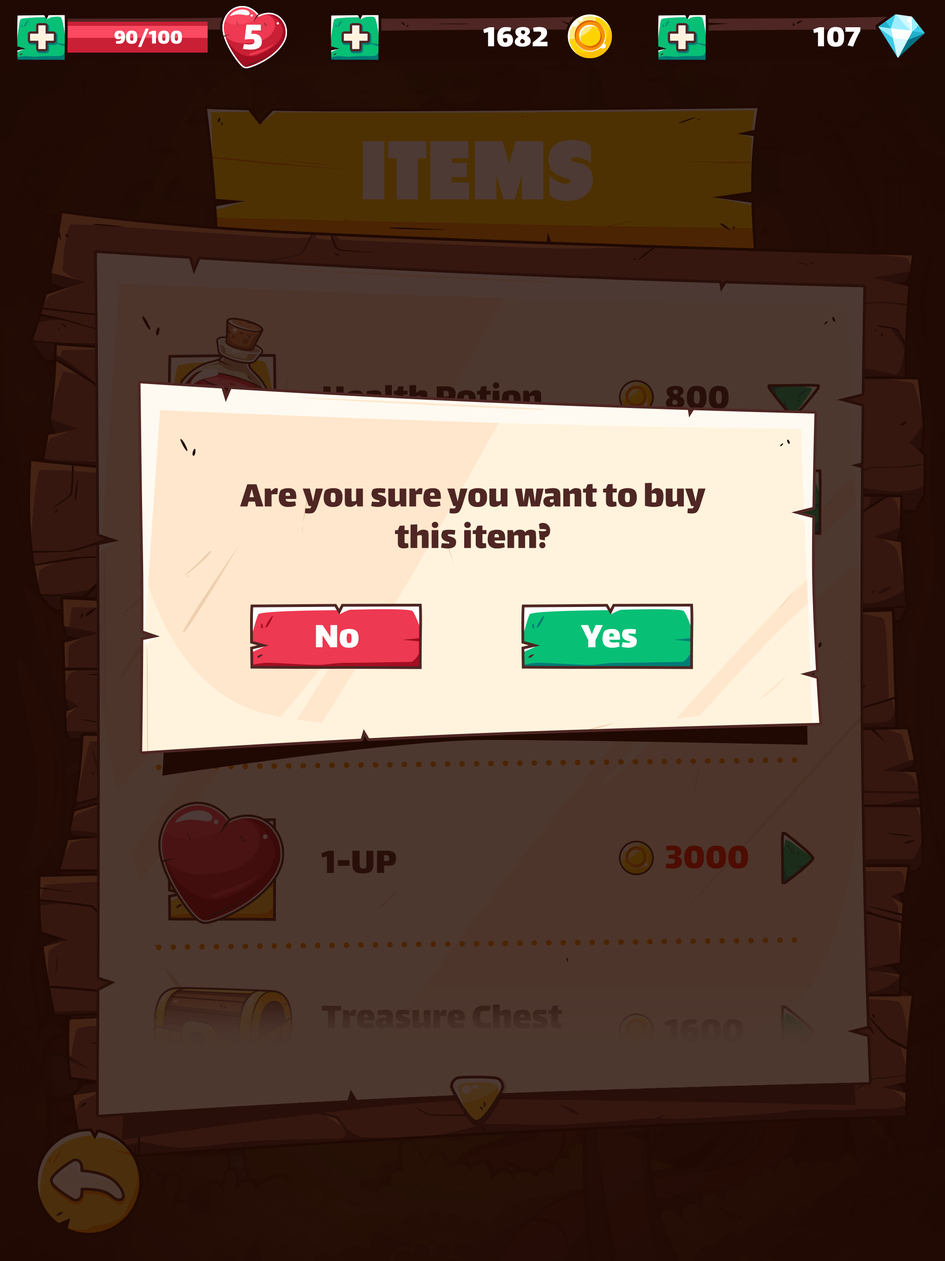
<style>
.page{position:relative;width:945px;height:1261px}
.page>*{position:absolute;margin:0}
.t1{font:57.2px "Lalezar-Regular";color:#fff3dd}
.t2{font:22.2px "Lalezar-Regular";color:#ffffff}
.t3{font:42.5px "Lalezar-Regular";color:#ffffff}
.t4{font:33.2px "Lalezar-Regular";color:#ffffff}
.t5{font:83.1px "Tondu-Beta";color:#4d3a35;text-transform:uppercase}
.t6{font:38.8px "Lalezar-Regular";color:#290f09}
.t7{font:38.8px/41.5px "Lalezar-Regular";color:#4e2623}
.t8{font:38.8px "Lalezar-Regular";color:#ffffff}
.t9{font:38.8px "Lalezar-Regular";color:#4d0d02}
.t10{font:38.8px "Lalezar-Regular";color:#4e2623}
</style>
<div class="page">
<p class="t1" style="left:30px;top:25px;width:24px;height:24px">+</p>
<p class="t2" style="left:114px;top:29px;width:68px;height:18px">90/100</p>
<p class="t3" style="left:243px;top:24px;width:19px;height:26px">5</p>
<p class="t1" style="left:344px;top:25px;width:24px;height:24px">+</p>
<p class="t4" style="left:483px;top:27px;width:65px;height:20px">1682</p>
<p class="t1" style="left:670px;top:25px;width:24px;height:24px">+</p>
<p class="t4" style="left:813px;top:27px;width:48px;height:20px">107</p>
<p class="t5" style="left:363px;top:140px;width:230px;height:61px">items</p>
<p class="t6" style="left:666px;top:386px;width:63px;height:23px">800</p>
<p class="t7" style="left:240px;top:483px;width:466px;height:66px;text-align:center">Are you sure you want to buy<br>this item?</p>
<p class="t8" style="left:316px;top:625px;width:43px;height:23px">No</p>
<p class="t8" style="left:581px;top:625px;width:56px;height:23px">Yes</p>
<p class="t9" style="left:666px;top:846px;width:83px;height:23px">3000</p>
<p class="t6" style="left:321px;top:851px;width:76px;height:23px">1-UP</p>
<p class="t10" style="left:322px;top:1005px;width:240px;height:24px">Treasure Chest</p>
<p class="t10" style="left:665px;top:1019px;width:78px;height:23px">1600</p>
</div>
